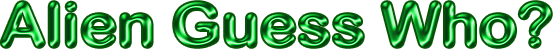
<style>
.page{position:relative;width:553px;height:49px;background:#ffffff}
.page>*{position:absolute;margin:0}
.t1{font:60px "ArialRoundedMTBold";scale:1.05 1}
</style>
<div class="page">
<p class="t1" style="left:1px;top:2px;width:550px;height:45px">Alien Guess Who?</p>
</div>
